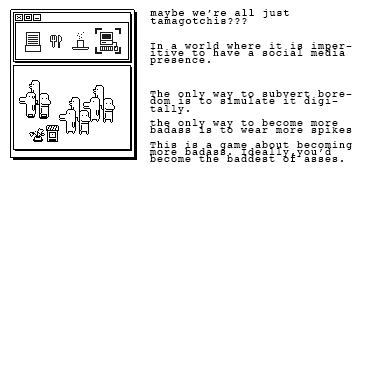
<style>
.page{position:relative;width:371px;height:370px;background:#ffffff}
.page>*{position:absolute;margin:0}
.t1{font:10px/7.2px "Courier";letter-spacing:0.1em;color:#000000}
</style>
<div class="page">
<p class="t1" style="left:150px;top:9px;width:140px;height:17px">maybe we’re all just <br>tamagotchis???</p>
<p class="t1" style="left:150px;top:42px;width:202px;height:23px">In a world where it is imperitive to have a social media presence.</p>
<p class="t1" style="left:149px;top:90px;width:203px;height:72px">The only way to subvert boredom is to simulate it digitally.<br><br>the only way to become more badass is to wear more spikes<br><br>This is a game about becoming more badass. Ideally,you’d become the baddest of asses.</p>
</div>
